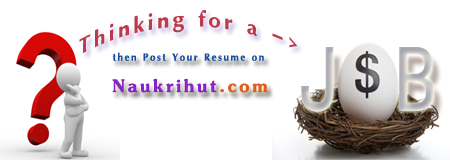
<style>
.page{position:relative;width:450px;height:160px;background:#ffffff}
.page>*{position:absolute;margin:0}
.t1{font:34.2px "IrisUPCBold";letter-spacing:0.1em;color:#bc3a4d;scale:0.97 1}
.t2{font:16.1px "IrisUPCBold";letter-spacing:0.1em;color:#184da4;scale:0.95 1}
.t3{font:29px "JasmineUPCBold";letter-spacing:0.1em;color:#8724c5;scale:0.95 1}
.t4{font:29px "JasmineUPCBold";letter-spacing:0.1em;color:#df5c1c;scale:0.95 1}
</style>
<div class="page">
<p class="t1" style="left:79px;top:10px;width:219px;height:43px">Thinking for a -&gt;</p>
<p class="t2" style="left:112px;top:52px;width:152px;height:9px">then Post Your Resume on</p>
<p class="t3" style="left:112px;top:78px;width:156px;height:15px">Naukrihut<span class="t4">.com</span></p>
</div>
